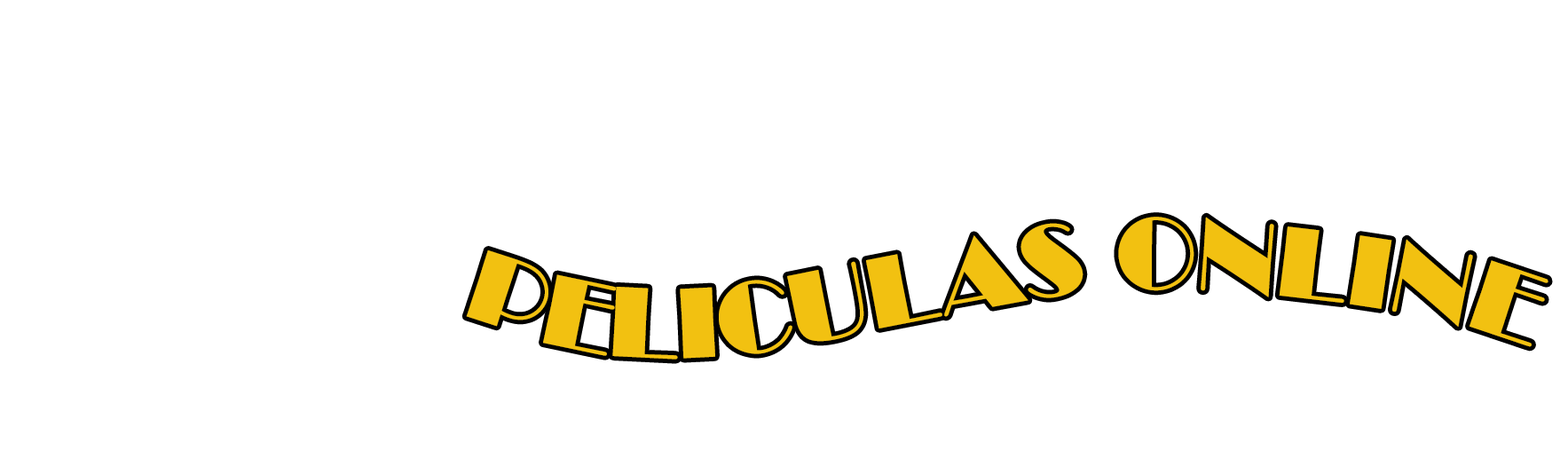
<style>
.page{position:relative;width:1568px;height:459px;background:#ffffff}
.page>*{position:absolute;margin:0}
.t1{font:103.8px "Broadway";color:#f2c111}
</style>
<div class="page">
<p class="t1" style="left:466px;top:217px;width:1082px;height:142px">PELICULAS ONLINE</p>
</div>
